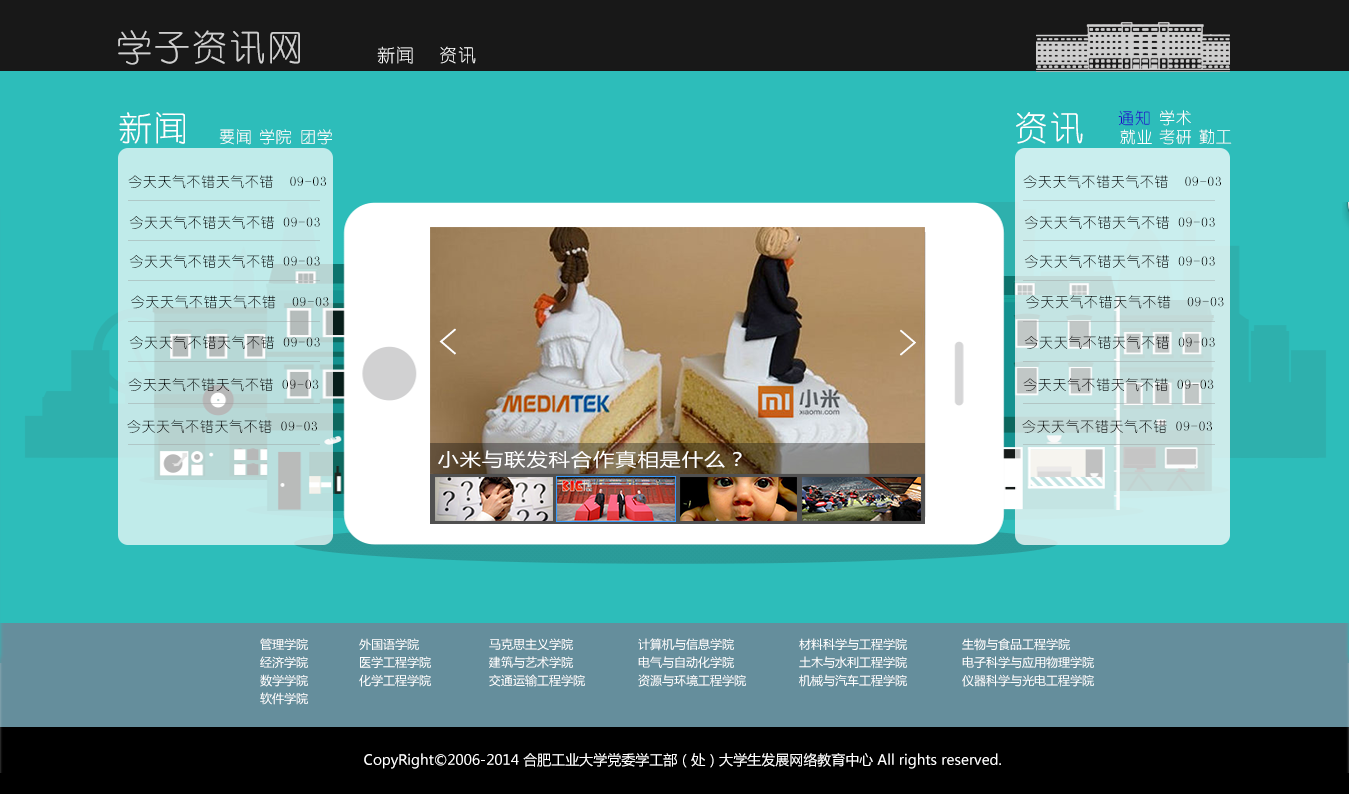
<style>
.page{position:relative;width:1349px;height:794px;background:#2dbdba}
.page>*{position:absolute;margin:0}
.t1{font:36px "YouYuan";letter-spacing:0.05em;color:#cfcfcf}
.t2{font:18px "YouYuan";letter-spacing:0.05em;color:#ffffff}
.t3{font:34px "YouYuan";letter-spacing:0.05em;color:#ffffff}
.t4{font:16px "YouYuan";letter-spacing:0.05em;color:#2105c7}
.t5{font:16px "YouYuan";letter-spacing:0.05em;color:#ffffff}
.t6{font:14px "YouYuan";letter-spacing:0.05em;color:#000000}
.t7{font:36px "YouYuan";letter-spacing:0.05em;color:#ffffff;font-weight:bold;scale:1.17 1}
.t8{font:18px "MicrosoftYaHei";letter-spacing:0.05em;color:#ffffff;scale:1.17 1}
.t9{font:12px/18px "MicrosoftYaHei";color:#ffffff}
.t10{font:14px "MicrosoftYaHei";color:#ffffff}
</style>
<div class="page">
<p class="t1" style="left:118px;top:30px;width:182px;height:35px">学子资讯网</p>
<p class="t2" style="left:377px;top:46px;width:36px;height:18px">新闻</p>
<p class="t2" style="left:440px;top:46px;width:36px;height:18px">资讯</p>
<p class="t3" style="left:119px;top:112px;width:66px;height:32px">新闻</p>
<p class="t3" style="left:1016px;top:112px;width:67px;height:32px">资讯</p>
<p class="t4" style="left:1118px;top:110px;width:32px;height:16px">通知</p>
<p class="t5" style="left:1160px;top:110px;width:31px;height:16px">学术</p>
<p class="t5" style="left:219px;top:129px;width:32px;height:16px">要闻</p>
<p class="t5" style="left:260px;top:129px;width:31px;height:16px">学院</p>
<p class="t5" style="left:301px;top:129px;width:31px;height:16px">团学</p>
<p class="t5" style="left:1120px;top:129px;width:32px;height:16px">就业</p>
<p class="t5" style="left:1159px;top:129px;width:32px;height:16px">考研</p>
<p class="t5" style="left:1199px;top:129px;width:33px;height:15px">勤工</p>
<p class="t6" style="left:128px;top:175px;width:198px;height:14px">今天天气不错天气不错  09-03</p>
<p class="t6" style="left:1023px;top:175px;width:198px;height:14px">今天天气不错天气不错  09-03</p>
<p class="t6" style="left:129px;top:215px;width:191px;height:14px">今天天气不错天气不错 09-03</p>
<p class="t6" style="left:1024px;top:215px;width:191px;height:14px">今天天气不错天气不错 09-03</p>
<p class="t6" style="left:129px;top:254px;width:191px;height:14px">今天天气不错天气不错 09-03</p>
<p class="t6" style="left:1024px;top:254px;width:191px;height:14px">今天天气不错天气不错 09-03</p>
<p class="t6" style="left:131px;top:295px;width:198px;height:14px">今天天气不错天气不错  09-03</p>
<p class="t6" style="left:1026px;top:295px;width:198px;height:14px">今天天气不错天气不错  09-03</p>
<p class="t7" style="left:439px;top:328px;width:17px;height:27px">&lt;</p>
<p class="t7" style="left:900px;top:329px;width:16px;height:27px">&gt;</p>
<p class="t6" style="left:129px;top:335px;width:191px;height:14px">今天天气不错天气不错 09-03</p>
<p class="t6" style="left:1024px;top:335px;width:191px;height:14px">今天天气不错天气不错 09-03</p>
<p class="t6" style="left:128px;top:378px;width:191px;height:14px">今天天气不错天气不错 09-03</p>
<p class="t6" style="left:1023px;top:378px;width:191px;height:14px">今天天气不错天气不错 09-03</p>
<p class="t6" style="left:127px;top:419px;width:190px;height:14px">今天天气不错天气不错 09-03</p>
<p class="t6" style="left:1022px;top:419px;width:190px;height:14px">今天天气不错天气不错 09-03</p>
<p class="t8" style="left:438px;top:450px;width:304px;height:19px">小米与联发科合作真相是什么？</p>
<p class="t9" style="left:260px;top:638px;width:48px;height:67px">管理学院<br>经济学院<br>数学学院<br>软件学院</p>
<p class="t9" style="left:359px;top:638px;width:72px;height:49px">外国语学院<br>医学工程学院<br>化学工程学院</p>
<p class="t9" style="left:489px;top:638px;width:96px;height:49px">马克思主义学院<br>建筑与艺术学院<br>交通运输工程学院</p>
<p class="t9" style="left:638px;top:638px;width:108px;height:49px">计算机与信息学院<br>电气与自动化学院<br>资源与环境工程学院</p>
<p class="t9" style="left:799px;top:638px;width:108px;height:49px">材料科学与工程学院<br>土木与水利工程学院<br>机械与汽车工程学院</p>
<p class="t9" style="left:962px;top:638px;width:132px;height:49px">生物与食品工程学院<br>电子科学与应用物理学院<br>仪器科学与光电工程学院</p>
<p class="t10" style="left:364px;top:753px;width:637px;height:16px">CopyRight©2006-2014 合肥工业大学党委学工部（处）大学生发展网络教育中心 All rights reserved.</p>
</div>
